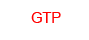
<style>
.page{position:relative;width:89px;height:40px;background:#ffffff}
.page>*{position:absolute;margin:0}
.t1{font:14.7px "ArialMT";color:#ff0000}
</style>
<div class="page">
<p class="t1" style="left:31px;top:12px;width:30px;height:11px">GTP</p>
</div>
